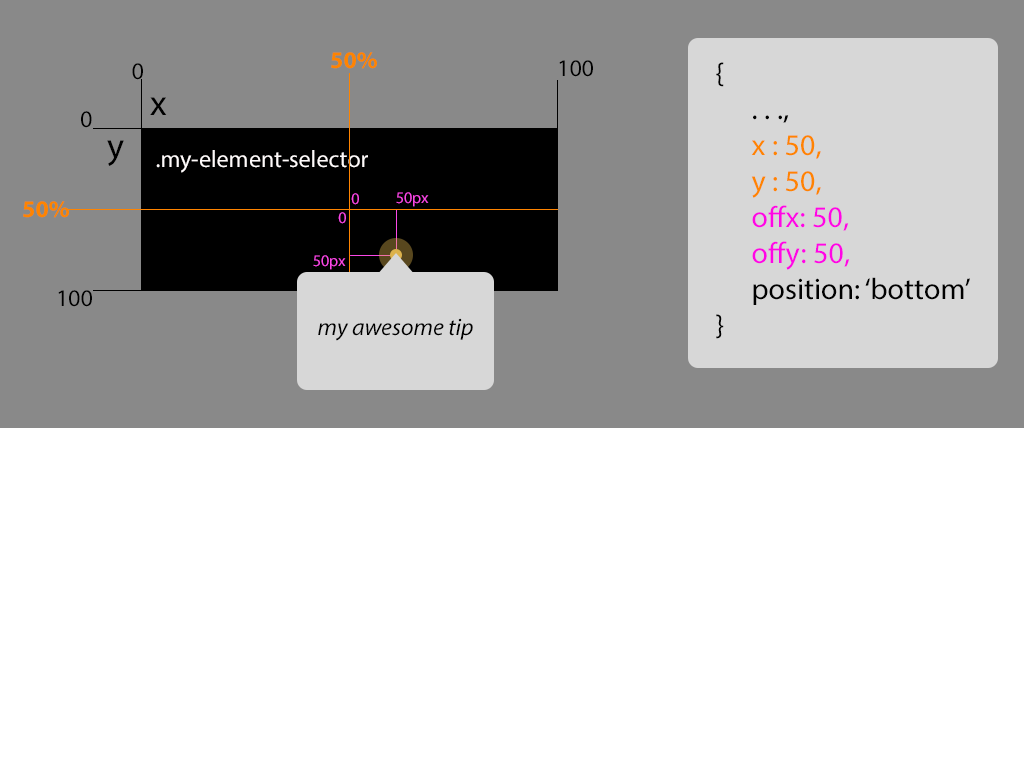
<style>
.page{position:relative;width:1024px;height:768px;background:#ffffff}
.page>*{position:absolute;margin:0}
.t1{font:24px "MyriadPro-Bold";color:#ff8400}
.t2{font:24px "MyriadPro-Regular";color:#000000}
.t3{font:30px "MyriadPro-Regular";color:#ff06e5}
.t4{font:30px "MyriadPro-Regular";color:#000000}
.t5{font:30px "MyriadPro-Regular";color:#ff8400}
.t6{font:36px "MyriadPro-Regular";color:#000000}
.t7{font:24px "MyriadPro-Regular";color:#fffbfb}
.t8{font:16px "MyriadPro-Regular";color:#fb48e6}
.t9{font:24px "MyriadPro-It";color:#000000}
</style>
<div class="page">
<p class="t1" style="left:331px;top:52px;width:46px;height:17px">50%</p>
<p class="t2" style="left:132px;top:63px;width:11px;height:17px">0</p>
<p class="t2" style="left:559px;top:60px;width:34px;height:17px">100</p>
<p class="t3" style="left:716px;top:62px;width:254px;height:277px"><span class="t4">{<br> . . .,<br> </span><span class="t5">x : 50,<br> y : 50,<br> </span>offx: 50,<br> offy: 50,<br> <span class="t4">position: ‘bottom’<br>}</span></p>
<p class="t6" style="left:150px;top:97px;width:17px;height:18px">x</p>
<p class="t2" style="left:81px;top:111px;width:11px;height:17px">0</p>
<p class="t6" style="left:107px;top:140px;width:17px;height:26px">y</p>
<p class="t7" style="left:156px;top:150px;width:212px;height:23px">.my-element-selector</p>
<p class="t8" style="left:351px;top:193px;width:8px;height:12px">0</p>
<p class="t8" style="left:396px;top:192px;width:33px;height:15px">50px</p>
<p class="t1" style="left:23px;top:201px;width:46px;height:17px">50%</p>
<p class="t8" style="left:338px;top:212px;width:8px;height:12px">0</p>
<p class="t8" style="left:313px;top:255px;width:33px;height:15px">50px</p>
<p class="t2" style="left:58px;top:290px;width:34px;height:17px">100</p>
<p class="t9" style="left:318px;top:318px;width:155px;height:23px">my awesome tip</p>
</div>
